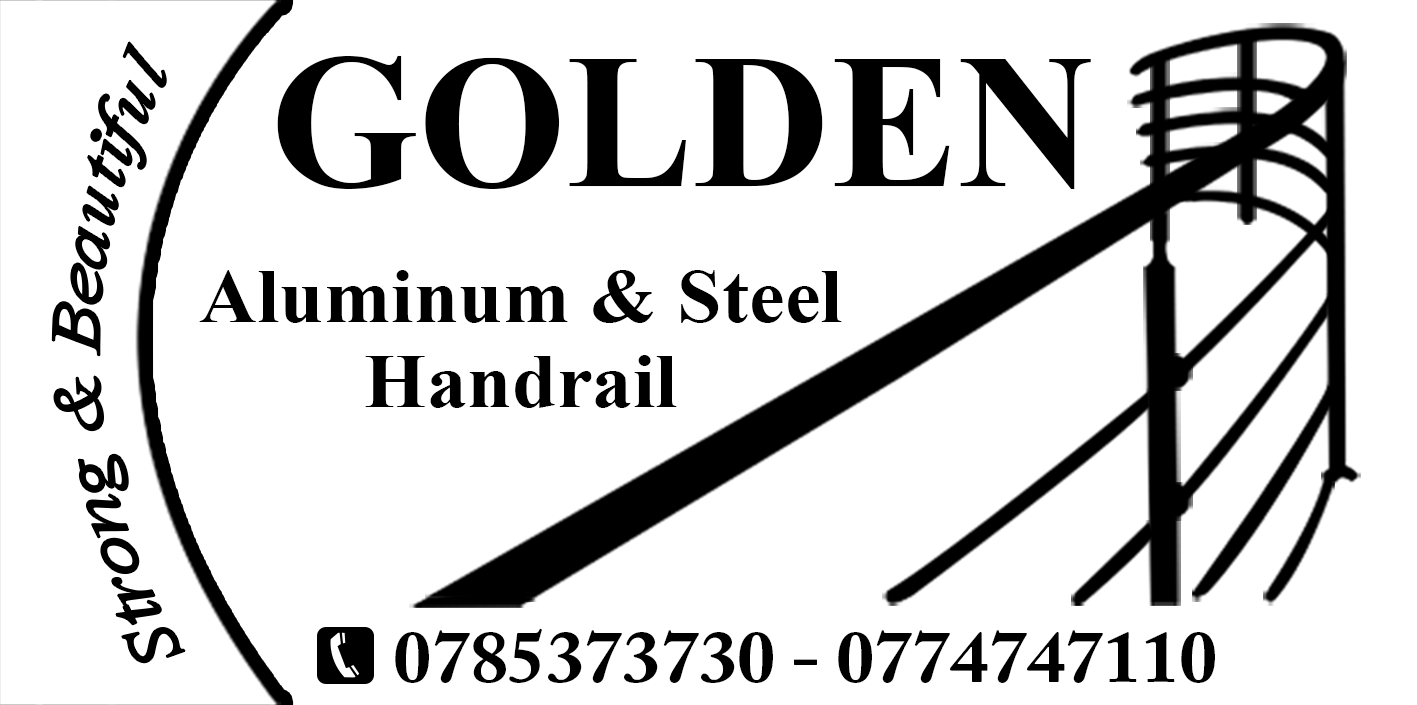
<style>
.page{position:relative;width:1417px;height:705px;background:#ffffff}
.page>*{position:absolute;margin:0}
.t1{font:86.8px "Vijaya";color:#000000;scale:1.04 1}
.t2{font:191.1px "TimesNewRomanPS-BoldMT";color:#000000}
.t3{font:78.1px/85.4px "TimesNewRomanPS-BoldMT";color:#000000;scale:1.03 1}
.t4{font:74px "ACaslonPro-Bold";color:#000000;scale:1.03 1}
</style>
<div class="page">
<p class="t1" style="left:52px;top:42px;width:133px;height:621px;rotate:-91deg">Strong &amp; Beautiful</p>
<p class="t2" style="left:277px;top:55px;width:814px;height:134px">GOLDEN</p>
<p class="t3" style="left:199px;top:270px;width:643px;height:138px;text-align:center">Aluminum &amp; Steel<br>Handrail</p>
<p class="t4" style="left:395px;top:628px;width:820px;height:55px">0774747110 - 0785373730</p>
</div>
